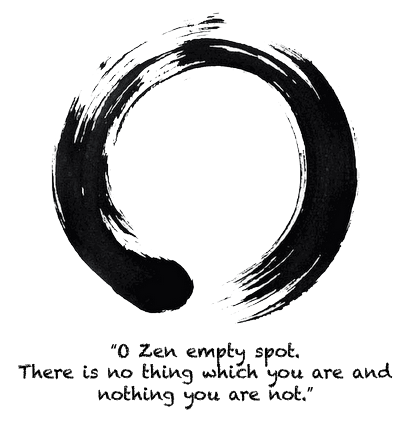
<style>
.page{position:relative;width:412px;height:421px;background:#ffffff}
.page>*{position:absolute;margin:0}
.t1{font:18px "Chalkduster";letter-spacing:-0.005em;color:#000000}
.t2{font:18px "MyriadPro-Regular";letter-spacing:-0.005em;color:#000000}
</style>
<div class="page">
<p class="t1" style="left:18px;top:342px;width:375px;height:68px;text-align:center"><span class="t2">“</span>O Zen empty spot.<br>There is no thing which you are and<br>nothing you are not.<span class="t2">”</span></p>
</div>
